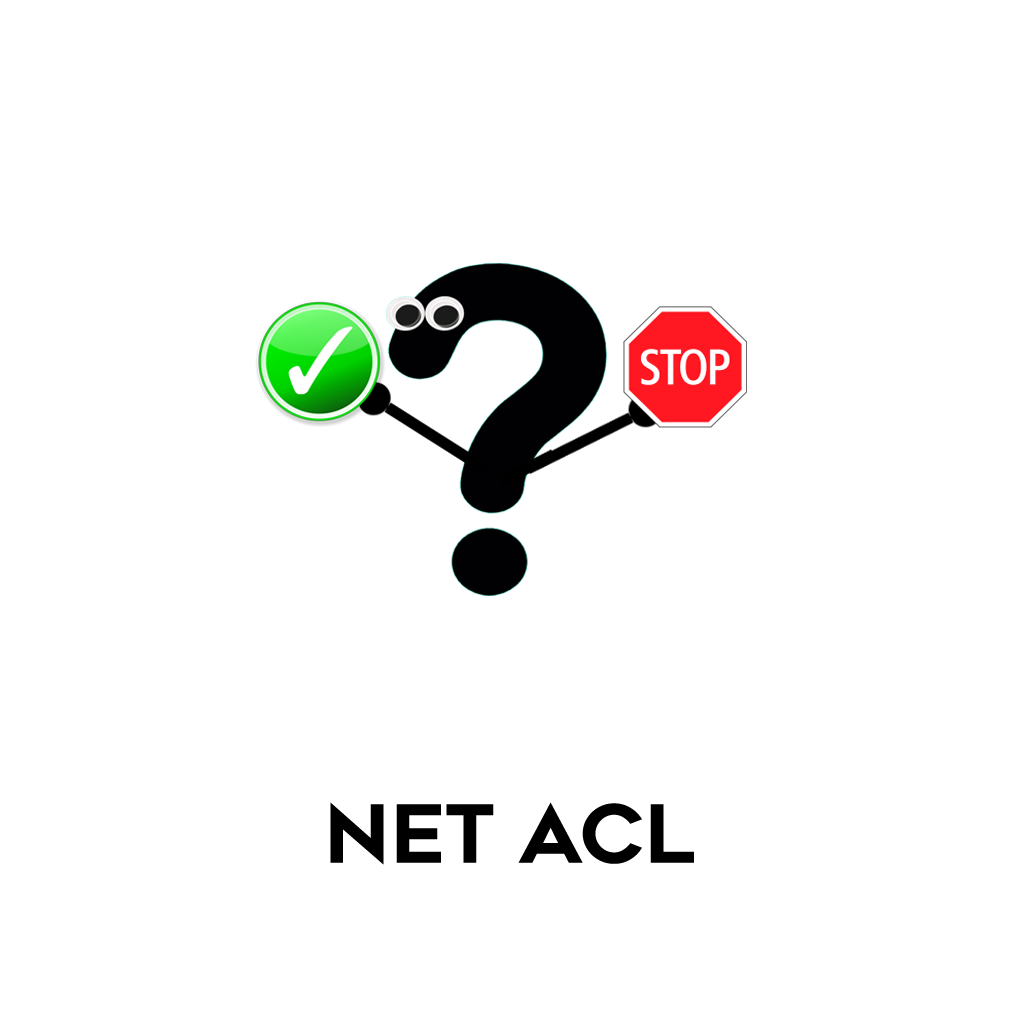
<style>
.page{position:relative;width:1024px;height:1024px;background:#ffffff}
.page>*{position:absolute;margin:0}
.t1{font:80px "Renogare-Regular";color:#000000}
</style>
<div class="page">
<p class="t1" style="left:330px;top:802px;width:364px;height:63px">NET ACL</p>
</div>
